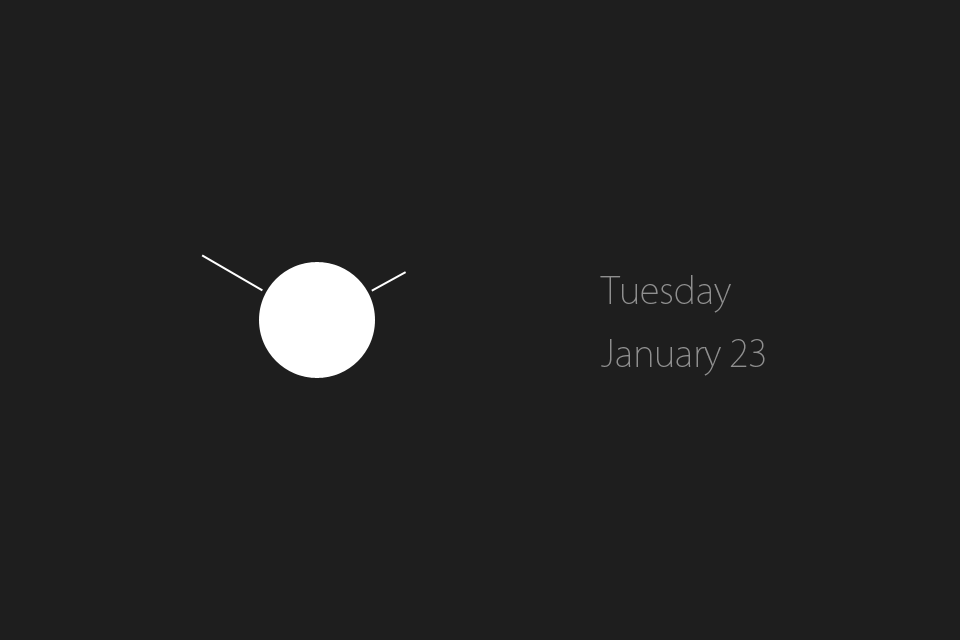
<style>
.page{position:relative;width:960px;height:640px;background:#1e1e1e}
.page>*{position:absolute;margin:0}
.t1{font:36.2px/63.4px "KozGoPr6N-ExtraLight";color:#8f8f8f}
</style>
<div class="page">
<p class="t1" style="left:600px;top:275px;width:165px;height:101px">Tuesday<br>January 23</p>
</div>
